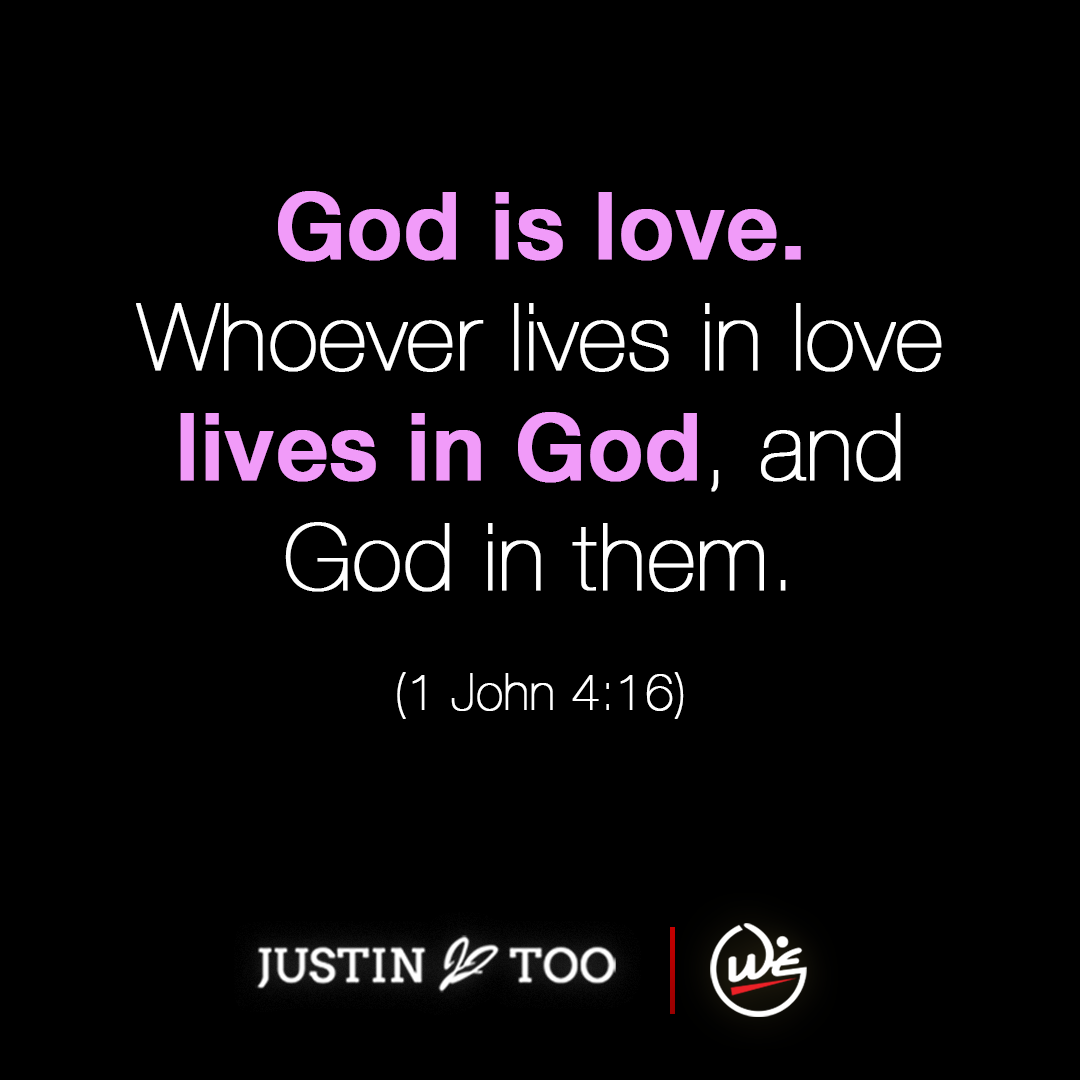
<style>
.page{position:relative;width:1080px;height:1080px;background:#000000}
.page>*{position:absolute;margin:0}
.t1{font:92px "HelveticaNeue-UltraLight";color:#ffffff;font-weight:bold}
.t2{font:92px "HelveticaNeue-Medium";color:#f19bf9;font-weight:bold}
.t3{font:50px "HelveticaNeue-UltraLight";color:#ffffff;font-weight:bold}
</style>
<div class="page">
<p class="t1" style="left:136px;top:191px;width:806px;height:528px;text-align:center"><span class="t2">God is love.</span> Whoever lives in love <span class="t2">lives in God</span>, and God in them.<span class="t3"><br><br>(1 John 4:16)</span></p>
</div>
